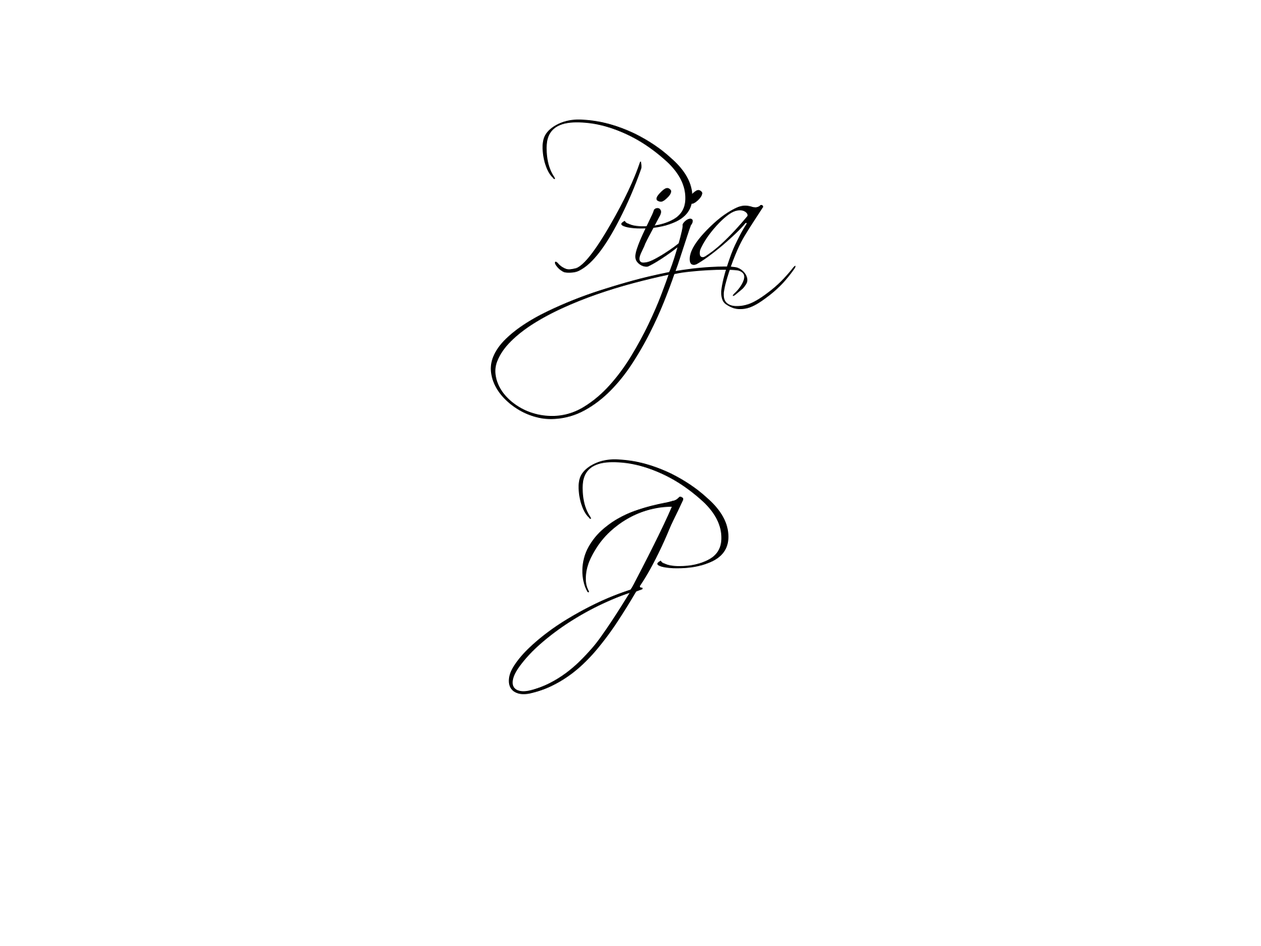
<style>
.page{position:relative;width:1261px;height:946px;background:#ffffff}
.page>*{position:absolute;margin:0}
.t1{font:166.8px "Scriptina";color:#000000}
</style>
<div class="page">
<p class="t1" style="left:490px;top:119px;width:306px;height:300px">Pija</p>
<p class="t1" style="left:508px;top:496px;width:175px;height:198px">J</p>
</div>
